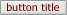
<style>
.page{position:relative;width:67px;height:15px;background:#e9e8e8}
.page>*{position:absolute;margin:0}
.t1{font:10px "Verdana";letter-spacing:-0.02em;color:#660000}
</style>
<div class="page">
<p class="t1" style="left:7px;top:3px;width:52px;height:8px">button title</p>
</div>
